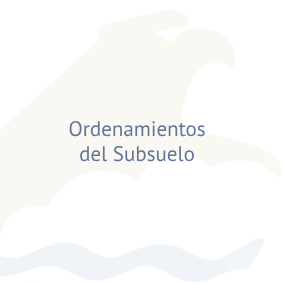
<style>
.page{position:relative;width:284px;height:284px;background:#ffffff}
.page>*{position:absolute;margin:0}
.t1{font:21px "MyriadPro-Regular";color:#617396}
</style>
<div class="page">
<p class="t1" style="left:69px;top:121px;width:136px;height:41px;text-align:center">Ordenamientos <br>del Subsuelo</p>
</div>
